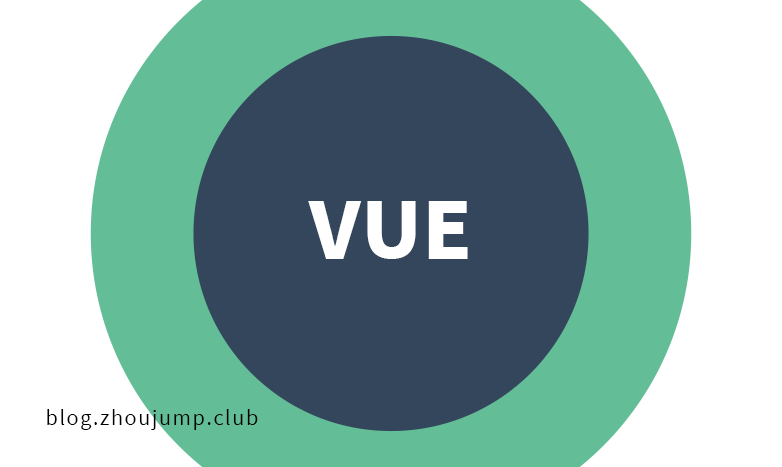
<style>
.page{position:relative;width:782px;height:467px;background:#63be98}
.page>*{position:absolute;margin:0}
.t1{font:80px "SourceHanSansCN-Heavy";color:#ffffff}
.t2{font:20px "SourceHanSansCN-Normal";letter-spacing:0.08em;color:#000000}
</style>
<div class="page">
<p class="t1" style="left:308px;top:201px;width:160px;height:58px">VUE</p>
<p class="t2" style="left:47px;top:409px;width:211px;height:21px">blog.zhoujump.club</p>
</div>
